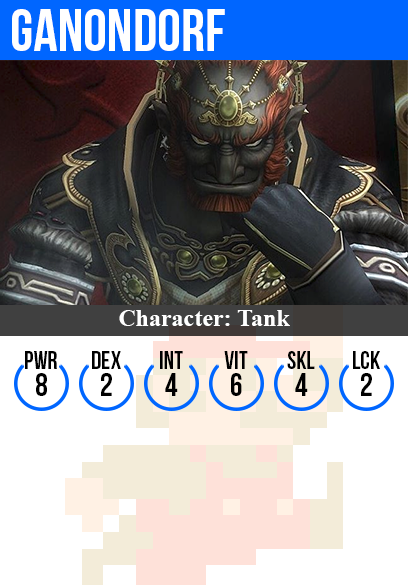
<style>
.page{position:relative;width:408px;height:585px;background:#ffffff}
.page>*{position:absolute;margin:0}
.t1{font:60px "BebasNeue";color:#ffffff}
.t2{font:24px "TimesNewRomanPS-BoldMT";color:#ffffff}
.t3{font:25px "BebasNeue";color:#000000}
.t4{font:32px "BebasNeue";color:#000000}
</style>
<div class="page">
<p class="t1" style="left:12px;top:9px;width:213px;height:42px">ganondorf</p>
<p class="t2" style="left:119px;top:310px;width:171px;height:16px">Character: Tank</p>
<p class="t3" style="left:25px;top:351px;width:32px;height:18px">PWR</p>
<p class="t3" style="left:92px;top:351px;width:29px;height:18px">dex</p>
<p class="t3" style="left:160px;top:351px;width:23px;height:18px">int</p>
<p class="t3" style="left:224px;top:351px;width:24px;height:18px">vit</p>
<p class="t3" style="left:287px;top:351px;width:28px;height:18px">skl</p>
<p class="t3" style="left:353px;top:351px;width:27px;height:18px">lck</p>
<p class="t4" style="left:36px;top:373px;width:11px;height:23px">8</p>
<p class="t4" style="left:101px;top:373px;width:11px;height:23px">2</p>
<p class="t4" style="left:165px;top:373px;width:13px;height:23px">4</p>
<p class="t4" style="left:231px;top:373px;width:11px;height:23px">6</p>
<p class="t4" style="left:295px;top:373px;width:13px;height:23px">4</p>
<p class="t4" style="left:361px;top:373px;width:11px;height:23px">2</p>
</div>
